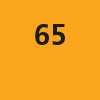
<style>
.page{position:relative;width:100px;height:100px;background:#faa51c}
.page>*{position:absolute;margin:0}
.t1{font:29.3px "Frutiger-Bold";color:#1c1c1c}
</style>
<div class="page">
<p class="t1" style="left:35px;top:24px;width:30px;height:21px">65</p>
</div>
